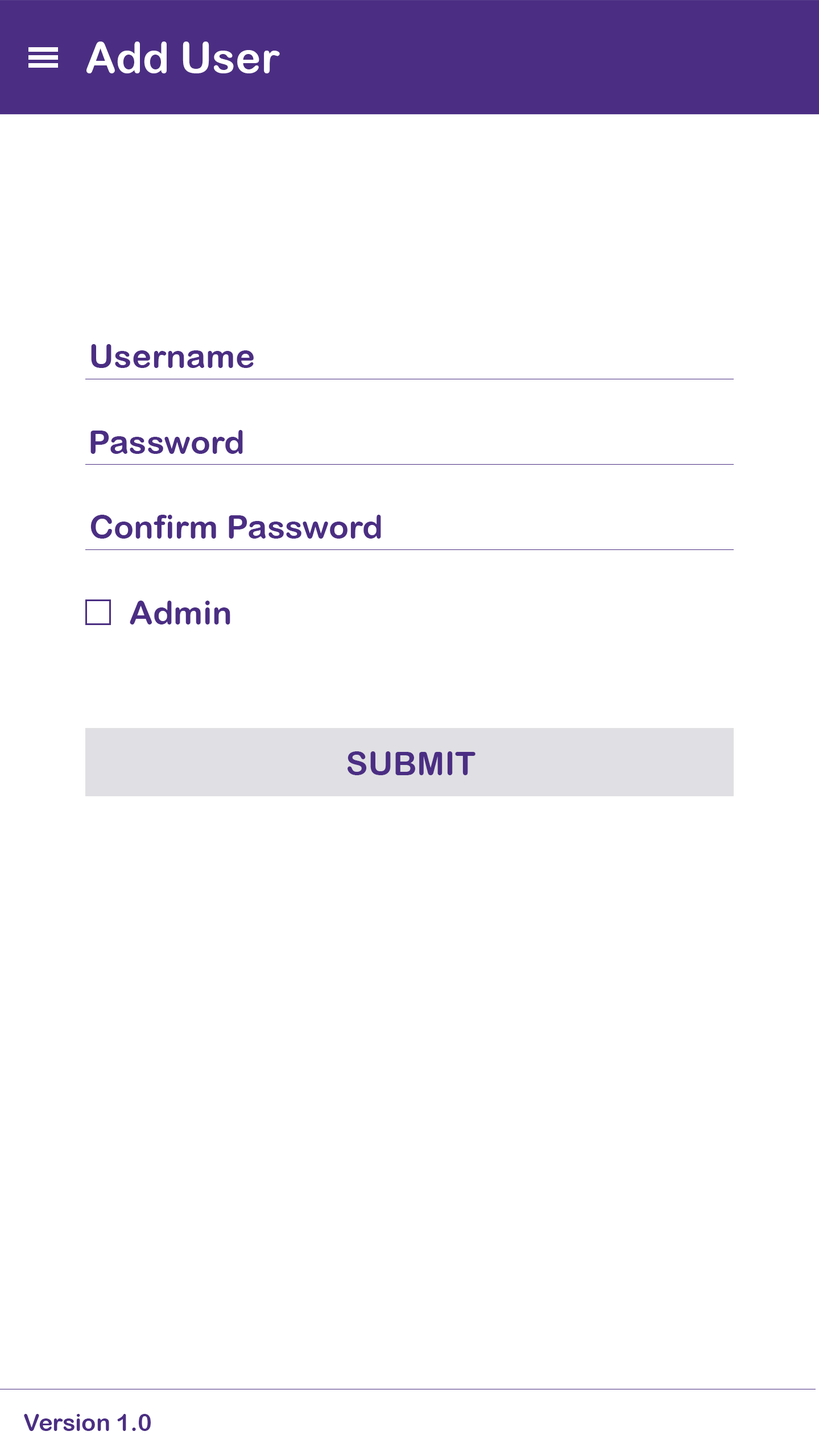
<style>
.page{position:relative;width:819px;height:1456px;background:#ffffff}
.page>*{position:absolute;margin:0}
.t1{font:42.7px "ArialRoundedMTBold";color:#ffffff}
.t2{font:33.2px "ArialRoundedMTBold";color:#4b2e83}
.t3{font:23.7px "ArialRoundedMTBold";color:#4b2e83}
</style>
<div class="page">
<p class="t1" style="left:86px;top:42px;width:194px;height:31px">Add User</p>
<p class="t2" style="left:91px;top:344px;width:163px;height:24px">Username</p>
<p class="t2" style="left:90px;top:430px;width:153px;height:24px">Password</p>
<p class="t2" style="left:90px;top:515px;width:291px;height:24px">Confirm Password</p>
<p class="t2" style="left:130px;top:601px;width:100px;height:23px">Admin</p>
<p class="t2" style="left:348px;top:751px;width:127px;height:24px">SUBMIT</p>
<p class="t3" style="left:24px;top:1414px;width:127px;height:17px">Version 1.0</p>
</div>
